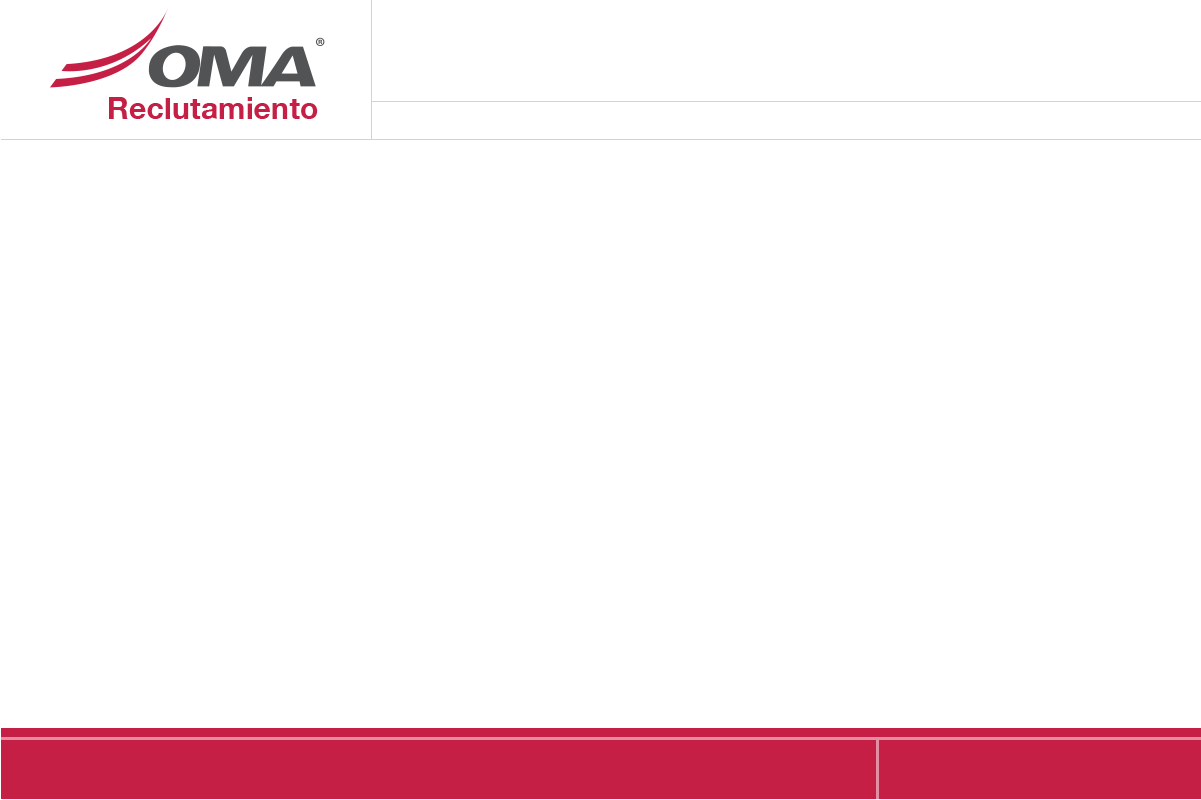
<style>
.page{position:relative;width:1201px;height:800px;background:#ffffff}
.page>*{position:absolute;margin:0}
.t1{font:30.5px "HelveticaNeue-Bold";color:#c61f46}
</style>
<div class="page">
<p class="t1" style="left:109px;top:97px;width:209px;height:22px">Reclutamiento</p>
</div>
